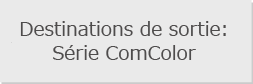
<style>
.page{position:relative;width:253px;height:84px;background:#eaeaea}
.page>*{position:absolute;margin:0}
.t1{font:19px/24px "Meiryo";color:#4e4c4c}
</style>
<div class="page">
<p class="t1" style="left:20px;top:21px;width:206px;height:39px;text-align:center">Destinations de sortie:<br>Série ComColor</p>
</div>
